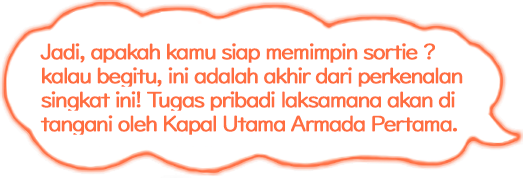
<style>
.page{position:relative;width:523px;height:178px;background:#ffffff}
.page>*{position:absolute;margin:0}
.t1{font:22px/24px "UDDigiKyokashoNP-R";letter-spacing:-0.08em;color:#ff6e40;font-weight:bold}
</style>
<div class="page">
<p class="t1" style="left:40px;top:43px;width:423px;height:92px">Jadi, apakah kamu siap memimpin sortie ?<br>kalau begitu, ini adalah akhir dari perkenalan<br>singkat ini! Tugas pribadi laksamana akan di<br>tangani oleh Kapal Utama Armada Pertama.</p>
</div>
